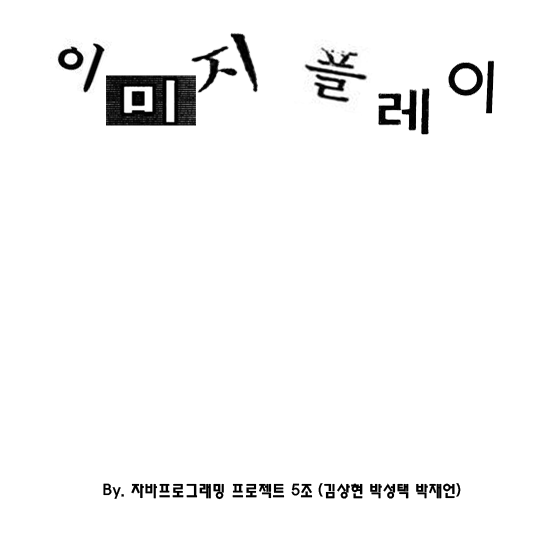
<style>
.page{position:relative;width:550px;height:550px;background:#ffffff}
.page>*{position:absolute;margin:0}
.t1{font:16px "HaanYHeadM";color:#000000}
</style>
<div class="page">
<p class="t1" style="left:103px;top:483px;width:358px;height:17px">By. 자바프로그래밍 프로젝트 5조 (김상현 박성택 박재언)</p>
</div>
